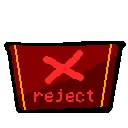
<style>
.page{position:relative;width:128px;height:128px;background:#ffffff}
.page>*{position:absolute;margin:0}
.t1{font:18px "VCROSDMono";color:#ff2828}
</style>
<div class="page">
<p class="t1" style="left:34px;top:89px;width:59px;height:13px">reject</p>
</div>
